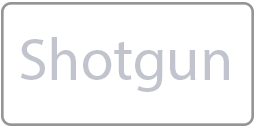
<style>
.page{position:relative;width:256px;height:128px;background:#ffffff}
.page>*{position:absolute;margin:0}
.t1{font:60px "MyriadPro-Regular";color:#c1c4cc}
</style>
<div class="page">
<p class="t1" style="left:21px;top:37px;width:208px;height:55px">Shotgun</p>
</div>
